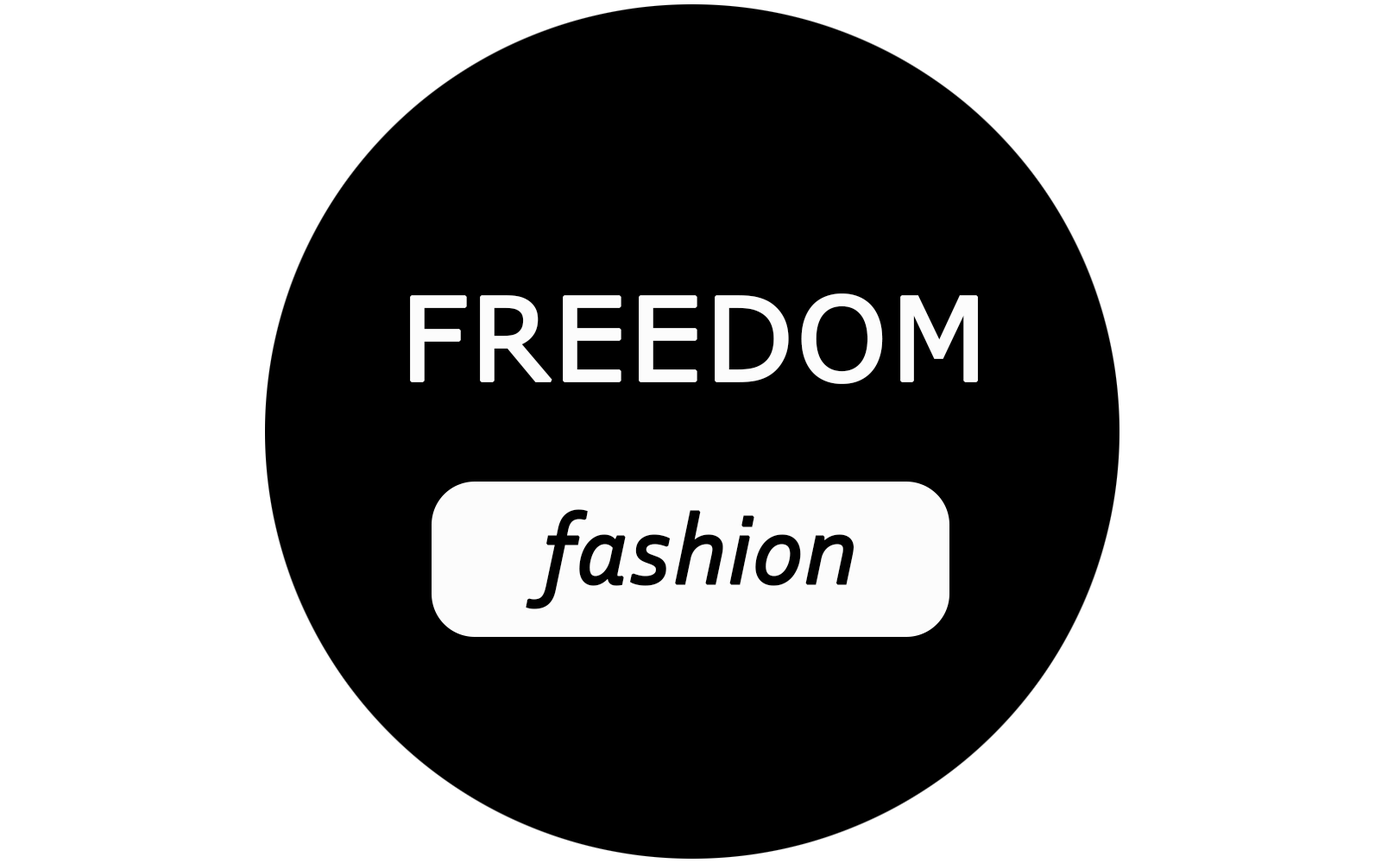
<style>
.page{position:relative;width:1381px;height:863px;background:#ffffff}
.page>*{position:absolute;margin:0}
.t1{font:115.1px "Verdana";color:#fcfcfc;font-weight:bold}
.t2{font:100.7px "Corbel-Italic";color:#010101;font-weight:bold}
</style>
<div class="page">
<p class="t1" style="left:410px;top:294px;width:568px;height:90px">FREEDOM</p>
<p class="t2" style="left:526px;top:509px;width:328px;height:100px">fashion</p>
</div>
